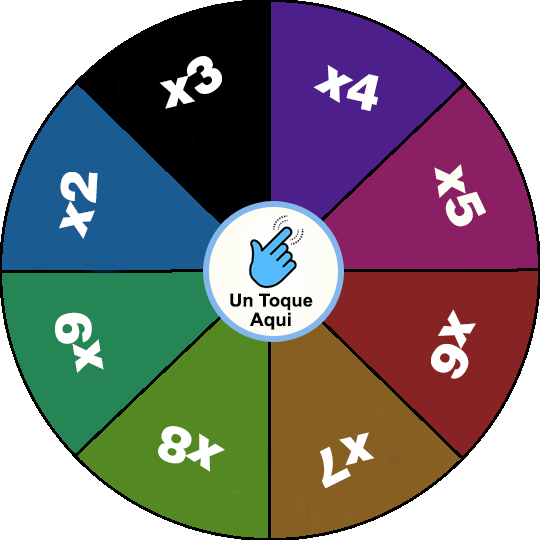
<style>
.page{position:relative;width:540px;height:540px;background:#ffffff}
.page>*{position:absolute;margin:0}
.t1{font:50px "Soopafresh";color:#ffffff}
.t2{font:50px "Soopafresh";color:#fdfdf6}
</style>
<div class="page">
<p class="t1" style="left:159px;top:56px;width:63px;height:53px;rotate:-24deg">x3</p>
<p class="t1" style="left:313px;top:65px;width:66px;height:46px;rotate:21deg">x4</p>
<p class="t1" style="left:59px;top:172px;width:39px;height:67px;rotate:-78deg">x2</p>
<p class="t2" style="left:434px;top:164px;width:52px;height:63px;rotate:71deg">x5</p>
<p class="t1" style="left:55px;top:312px;width:49px;height:61px;rotate:-109deg">x9</p>
<p class="t1" style="left:431px;top:309px;width:45px;height:70px;rotate:110deg">x6</p>
<p class="t1" style="left:158px;top:426px;width:67px;height:46px;rotate:-157deg">x8</p>
<p class="t1" style="left:320px;top:432px;width:55px;height:57px;rotate:156deg">x7</p>
</div>
